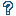
<style>
.page{position:relative;width:16px;height:16px;background:#ffffff}
.page>*{position:absolute;margin:0}
.t1{font:16px "Arial-BoldMT";color:#ebebeb}
</style>
<div class="page">
<p class="t1" style="left:4px;top:2px;width:8px;height:12px">?</p>
</div>
